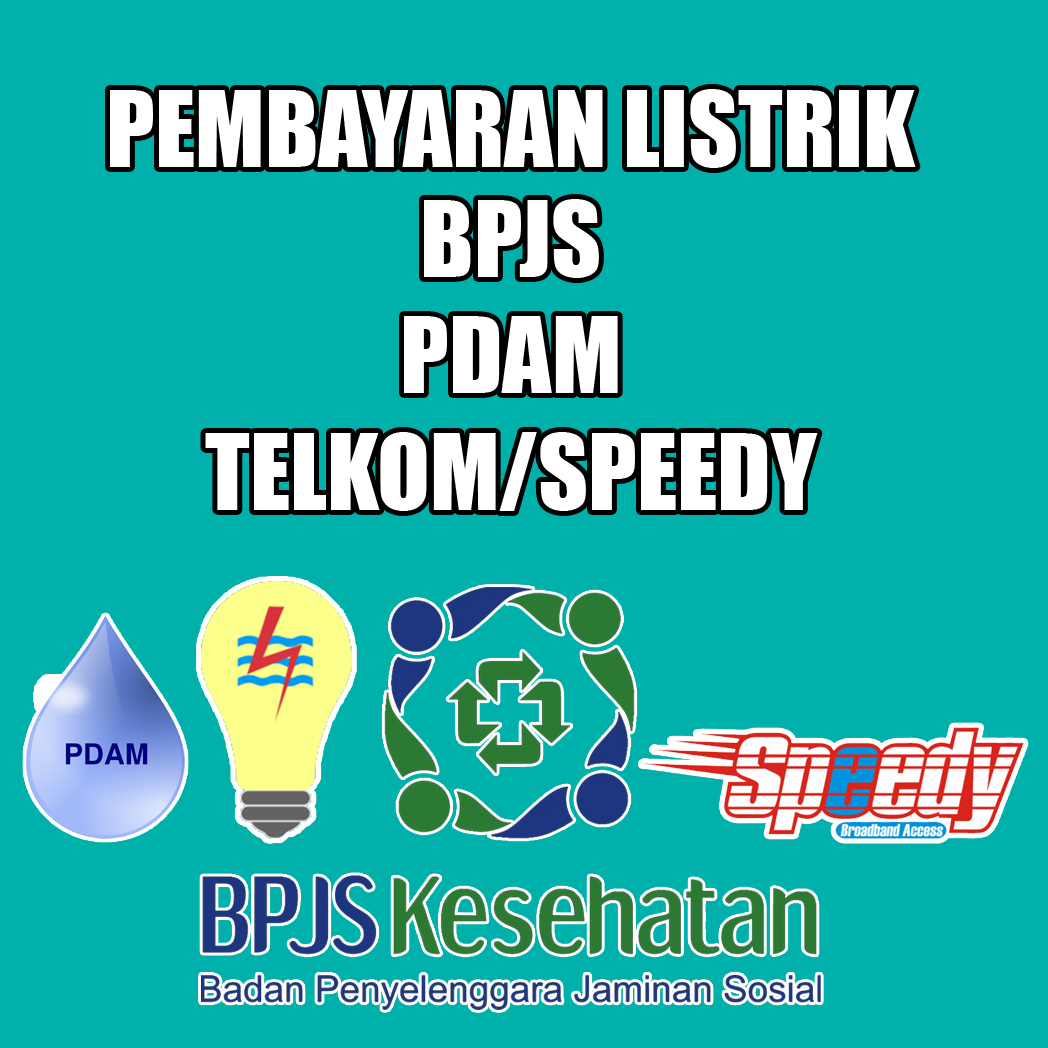
<style>
.page{position:relative;width:1048px;height:1048px;background:#00b0aa}
.page>*{position:absolute;margin:0}
.t1{font:97px "Impact";color:#ffffff}
</style>
<div class="page">
<p class="t1" style="left:110px;top:89px;width:806px;height:79px">PEMBAYARAN LISTRIK</p>
<p class="t1" style="left:205px;top:199px;width:613px;height:312px;text-align:center">BPJS<br>PDAM<br>TELKOM/SPEEDY</p>
</div>
